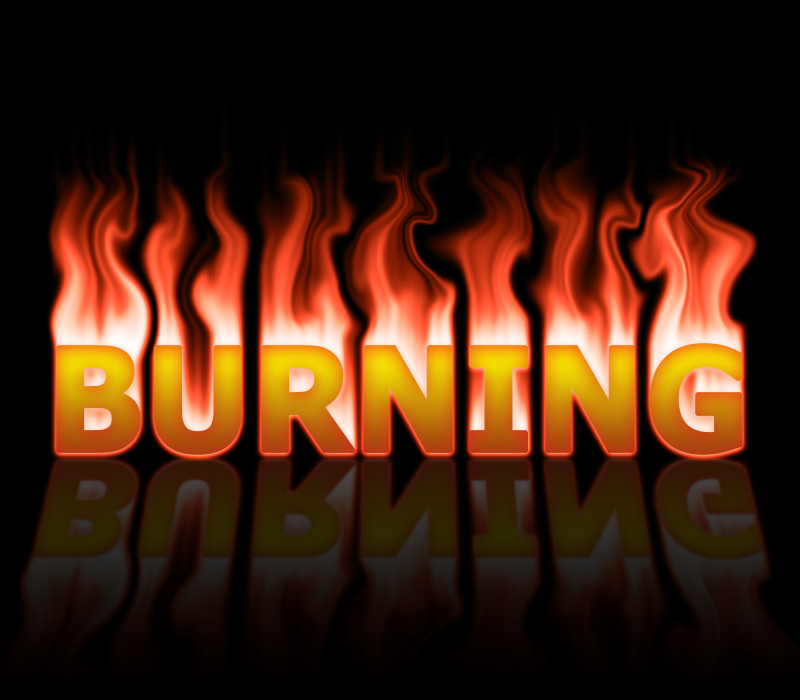
<style>
.page{position:relative;width:800px;height:700px;background:#000000}
.page>*{position:absolute;margin:0}
.t1{font:143px "Verdana-Bold";letter-spacing:-0.025em;font-weight:bold;scale:0.91 1}
</style>
<div class="page">
<p class="t1" style="left:56px;top:343px;width:687px;height:112px">BURNING</p>
</div>
